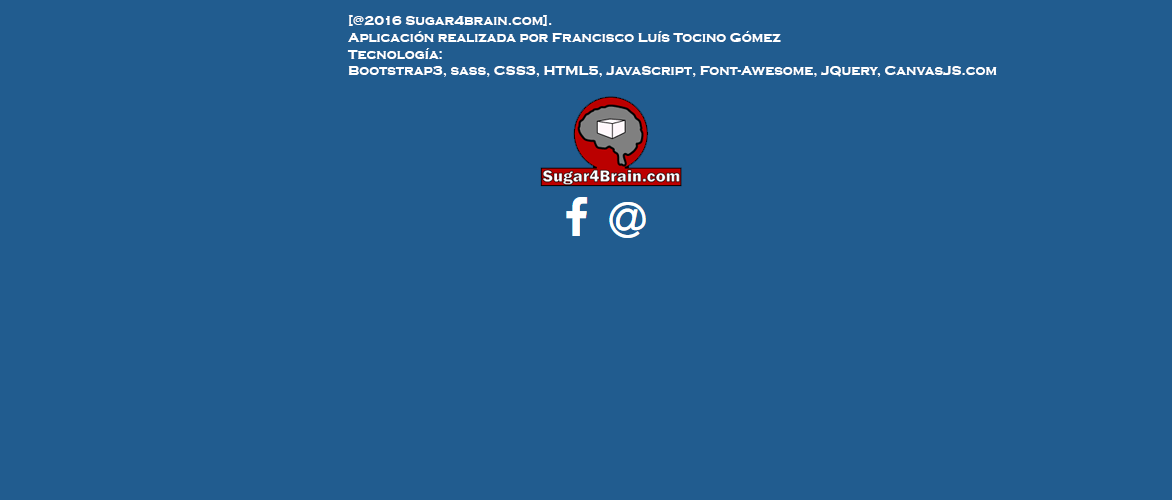
<style>
.page{position:relative;width:1172px;height:500px;background:#215c8f}
.page>*{position:absolute;margin:0}
.t1{font:14px "CopperplateGothic-Bold";color:#ffffff}
</style>
<div class="page">
<p class="t1" style="left:347px;top:15px;width:650px;height:62px">[@2016 Sugar4brain.com].<br>Aplicación realizada por Francisco Luís Tocino Gómez <br>Tecnología: <br>Bootstrap3, sass, CSS3, HTML5, JavaScript, Font-Awesome, JQuery, CanvasJS.com</p>
</div>
